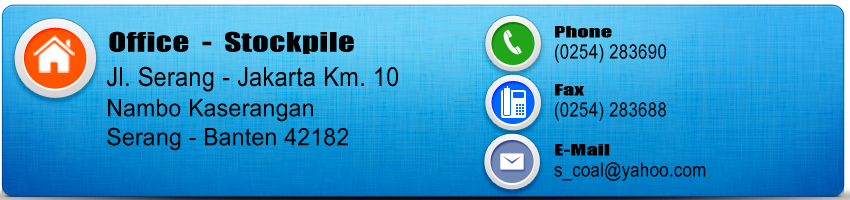
<style>
.page{position:relative;width:850px;height:200px}
.page>*{position:absolute;margin:0}
.t1{font:14.6px "Impact";letter-spacing:0.01em;color:#000000;scale:1.52 1}
.t2{font:25.1px "Impact";letter-spacing:0.01em;color:#000000;scale:1.31 1}
.t3{font:27.4px "Utsaah";letter-spacing:0.01em;color:#000000;scale:0.86 1}
.t4{font:37px "Utsaah";letter-spacing:0.01em;color:#000000;scale:0.89 1}
.t5{font:33.5px "Utsaah";letter-spacing:0.01em;color:#000000;scale:0.95 1}
</style>
<div class="page">
<p class="t1" style="left:555px;top:26px;width:57px;height:12px">Phone</p>
<p class="t2" style="left:109px;top:31px;width:245px;height:23px">Office  -  Stockpile</p>
<p class="t3" style="left:555px;top:44px;width:111px;height:19px">(0254) 283690</p>
<p class="t4" style="left:107px;top:66px;width:291px;height:26px">Jl. Serang - Jakarta Km. 10</p>
<p class="t1" style="left:555px;top:84px;width:29px;height:12px">Fax</p>
<p class="t5" style="left:108px;top:99px;width:205px;height:23px">Nambo Kaserangan</p>
<p class="t3" style="left:555px;top:102px;width:111px;height:19px">(0254) 283688</p>
<p class="t5" style="left:107px;top:127px;width:241px;height:24px">Serang - Banten 42182</p>
<p class="t1" style="left:555px;top:144px;width:55px;height:12px">E-Mail</p>
<p class="t3" style="left:554px;top:162px;width:152px;height:19px">s_coal@yahoo.com</p>
</div>
